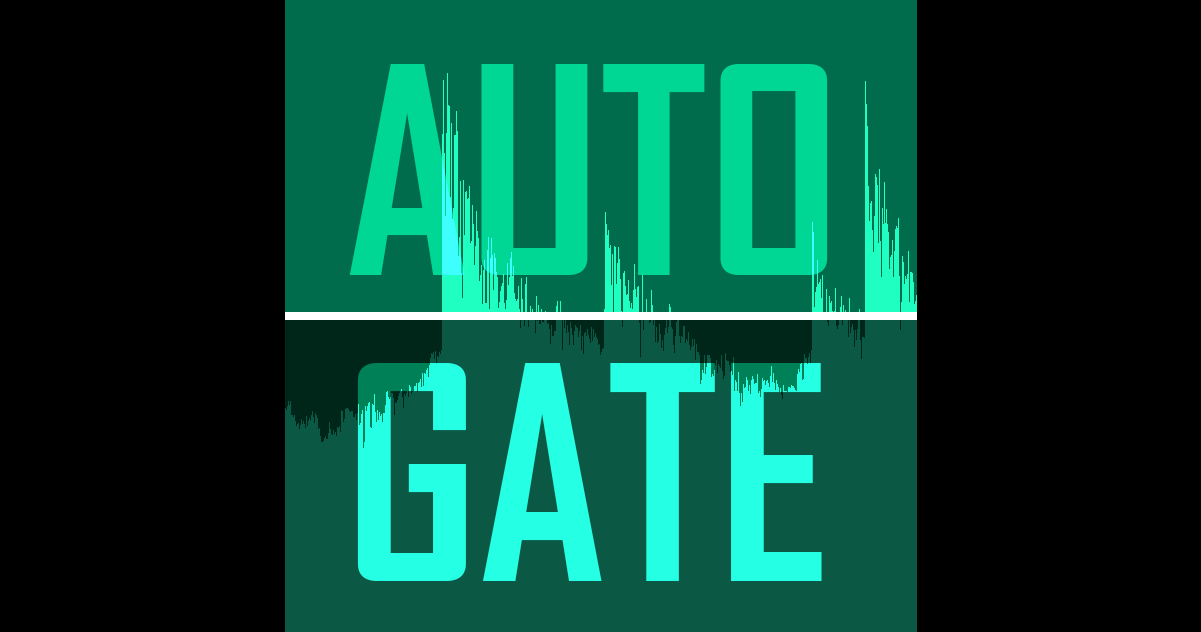
<style>
.page{position:relative;width:1201px;height:632px;background:#000000}
.page>*{position:absolute;margin:0}
.t1{font:276px "AgencyFB-Bold";color:#00d795;text-transform:uppercase}
.t2{font:284.7px "AgencyFB-Bold";color:#25ffe4;text-transform:uppercase}
</style>
<div class="page">
<p class="t1" style="left:349px;top:64px;width:479px;height:211px">AUTO</p>
<p class="t2" style="left:357px;top:363px;width:465px;height:218px">GATE</p>
</div>
